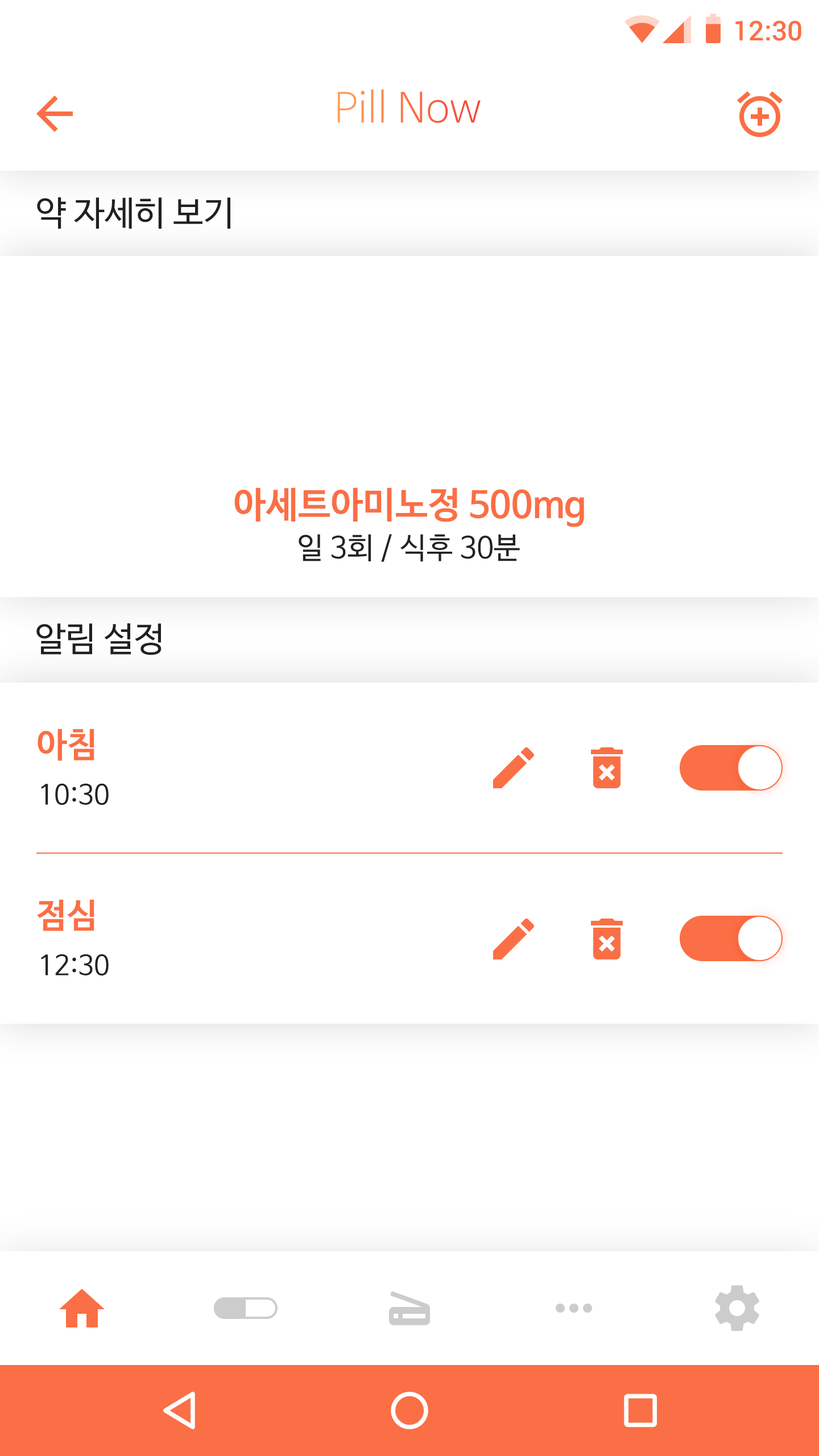
<style>
.page{position:relative;width:819px;height:1456px;background:#ffffff}
.page>*{position:absolute;margin:0}
.t1{font:27.3px "Roboto-Medium";color:#fa6f45}
.t2{font:40.9px "NanumBarunGothicLight"}
.t3{font:34.1px "NanumBarunGothic";color:#202020}
.t4{font:36.4px "NanumBarunGothicBold";color:#fa6f45}
.t5{font:29.6px "NanumBarunGothic";color:#222222}
.t6{font:34.1px "NanumBarunGothicBold";color:#fa6f45}
.t7{font:27.3px "NanumBarunGothic";color:#222222}
</style>
<div class="page">
<p class="t1" style="left:735px;top:20px;width:66px;height:21px">12:30</p>
<p class="t2" style="left:337px;top:89px;width:144px;height:34px">Pill Now</p>
<p class="t3" style="left:37px;top:197px;width:193px;height:32px">약 자세히 보기</p>
<p class="t4" style="left:234px;top:487px;width:350px;height:40px">아세트아미노정 500mg</p>
<p class="t5" style="left:299px;top:534px;width:221px;height:28px">일 3회 / 식후 30분</p>
<p class="t3" style="left:36px;top:623px;width:126px;height:32px">알림 설정</p>
<p class="t6" style="left:38px;top:729px;width:56px;height:32px">아침</p>
<p class="t7" style="left:41px;top:783px;width:68px;height:22px">10:30</p>
<p class="t6" style="left:37px;top:899px;width:57px;height:32px">점심</p>
<p class="t7" style="left:41px;top:954px;width:68px;height:22px">12:30</p>
</div>
